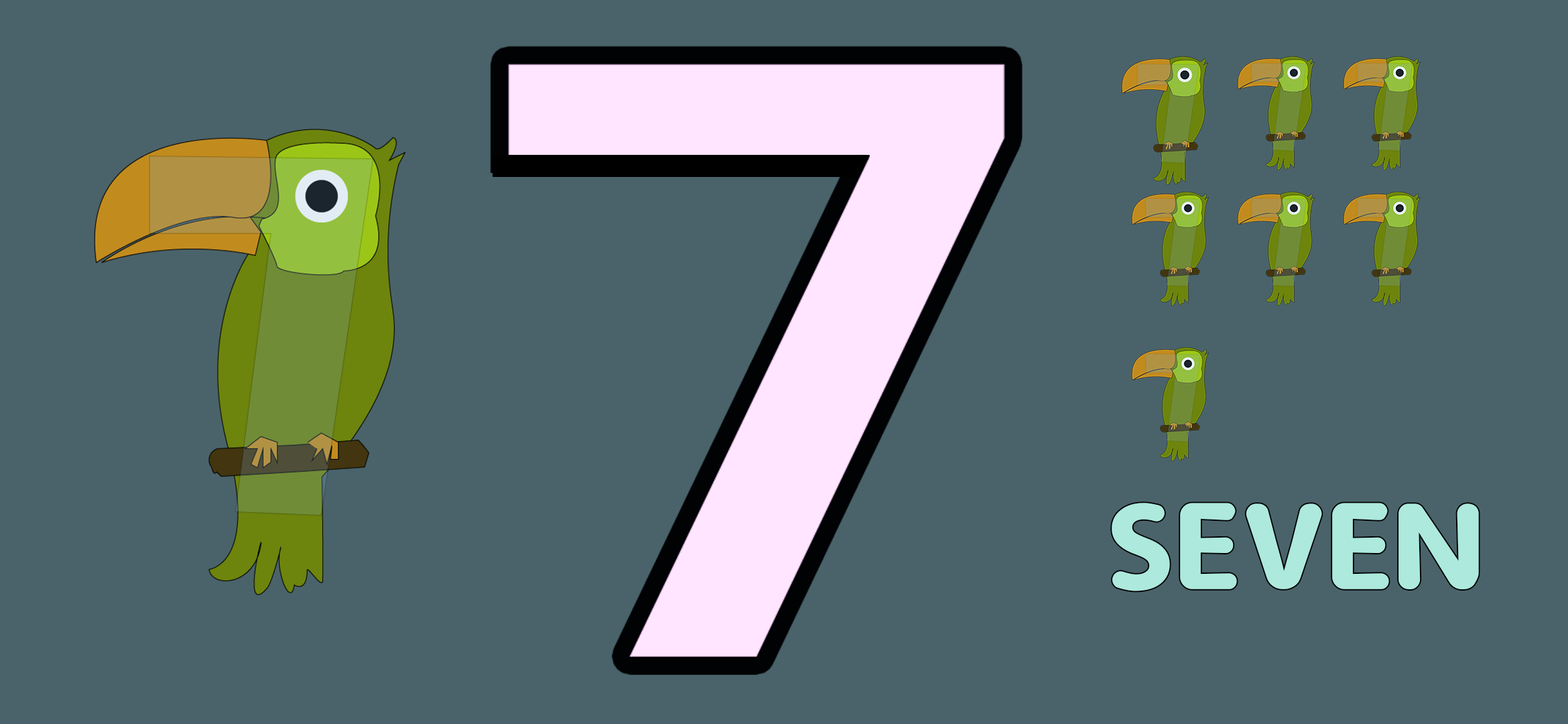
<style>
.page{position:relative;width:1568px;height:724px;background:#4a636b}
.page>*{position:absolute;margin:0}
.t1{font:139.6px "Dyuthi";color:#ade9dd}
</style>
<div class="page">
<p class="t1" style="left:1112px;top:503px;width:367px;height:88px">SEVEN</p>
</div>
